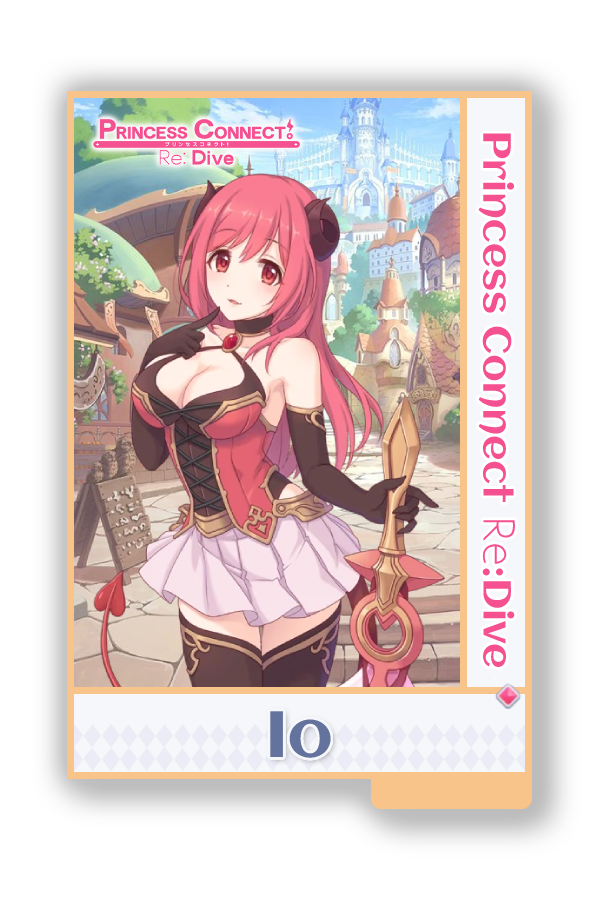
<style>
.page{position:relative;width:600px;height:900px;background:#ffffff}
.page>*{position:absolute;margin:0}
.t1{font:39px "Aclonica-Regular";color:#f55191}
.t2{font:39px "AaarghNormal";color:#f55191}
.t3{font:65px "Aclonica-Regular";color:#64739d}
</style>
<div class="page">
<p class="t1" style="left:478px;top:133px;width:38px;height:534px;rotate:90deg">Princess Connect <span class="t2">Re</span>:Dive</p>
<p class="t3" style="left:270px;top:711px;width:61px;height:47px">Io</p>
</div>
